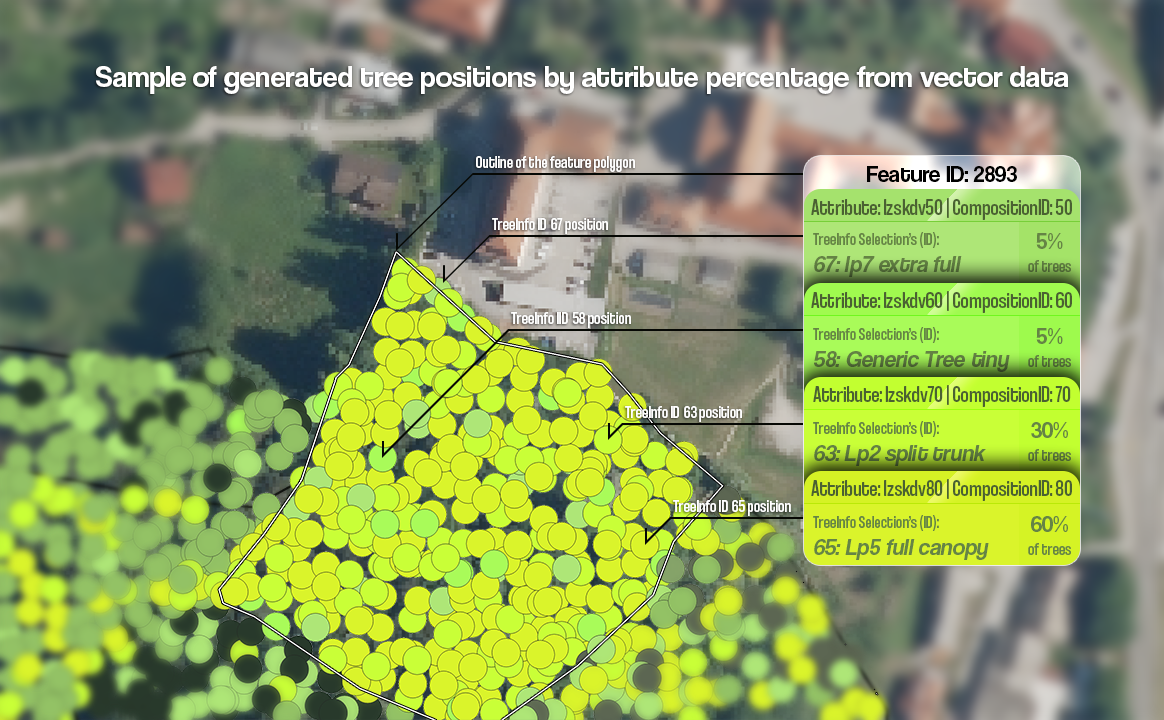
<style>
.page{position:relative;width:1164px;height:720px}
.page>*{position:absolute;margin:0}
.t1{font:30px "CoolveticaRg-Regular";color:#ffffff}
.t2{font:18px "CoolveticaCondensedRg-Regular";color:#ffffff}
.t3{font:23px "CoolveticaRg-Regular";color:#000000}
.t4{font:23px "CoolveticaCondensedRg-Regular";color:#4a6132}
.t5{font:18px "CoolveticaCondensedRg-Regular";color:#658445}
.t6{font:23px "CoolveticaRg-Regular";color:#658445}
.t7{font:23px "CoolveticaRg-Italic";color:#658445}
.t8{font:18px "CoolveticaCondensedRg-Regular";color:#546e3a}
</style>
<div class="page">
<p class="t1" style="left:96px;top:66px;width:972px;height:28px">Sample of generated tree positions by attribute percentage from vector data</p>
<p class="t2" style="left:476px;top:156px;width:159px;height:16px">Outline of the feature polygon</p>
<p class="t3" style="left:867px;top:166px;width:150px;height:16px">Feature ID: 2893</p>
<p class="t4" style="left:811px;top:198px;width:261px;height:22px">Attribute: lzskdv50 | CompositionID: 50</p>
<p class="t2" style="left:492px;top:218px;width:116px;height:16px">TreeInfo ID  67 position</p>
<p class="t5" style="left:813px;top:232px;width:126px;height:16px">TreeInfo Selection’s (ID):</p>
<p class="t6" style="left:1036px;top:233px;width:27px;height:16px">5%</p>
<p class="t7" style="left:814px;top:256px;width:148px;height:21px">67: lp7 extra full</p>
<p class="t5" style="left:1028px;top:260px;width:43px;height:12px">of trees</p>
<p class="t4" style="left:811px;top:291px;width:261px;height:22px">Attribute: lzskdv60 | CompositionID: 60</p>
<p class="t2" style="left:511px;top:312px;width:120px;height:16px">TreeInfo IID  58 position</p>
<p class="t5" style="left:813px;top:327px;width:126px;height:16px">TreeInfo Selection’s (ID):</p>
<p class="t6" style="left:1036px;top:328px;width:27px;height:16px">5%</p>
<p class="t7" style="left:814px;top:351px;width:196px;height:21px">58: Generic Tree tiny</p>
<p class="t8" style="left:1028px;top:355px;width:43px;height:12px">of trees</p>
<p class="t4" style="left:813px;top:385px;width:258px;height:22px">Attribute: lzskdv70 | CompositionID: 70</p>
<p class="t2" style="left:625px;top:406px;width:117px;height:16px">TreeInfo ID  63 position</p>
<p class="t5" style="left:813px;top:421px;width:126px;height:16px">TreeInfo Selection’s (ID):</p>
<p class="t6" style="left:1031px;top:422px;width:37px;height:16px">30%</p>
<p class="t7" style="left:814px;top:445px;width:172px;height:21px">63: Lp2 split trunk</p>
<p class="t8" style="left:1028px;top:449px;width:43px;height:12px">of trees</p>
<p class="t4" style="left:811px;top:479px;width:261px;height:22px">Attribute: lzskdv80 | CompositionID: 80</p>
<p class="t2" style="left:673px;top:500px;width:118px;height:16px">TreeInfo ID  65 position</p>
<p class="t5" style="left:813px;top:515px;width:126px;height:16px">TreeInfo Selection’s (ID):</p>
<p class="t6" style="left:1031px;top:516px;width:37px;height:16px">60%</p>
<p class="t7" style="left:814px;top:539px;width:175px;height:21px">65: Lp5 full canopy</p>
<p class="t5" style="left:1028px;top:543px;width:43px;height:12px">of trees</p>
</div>
